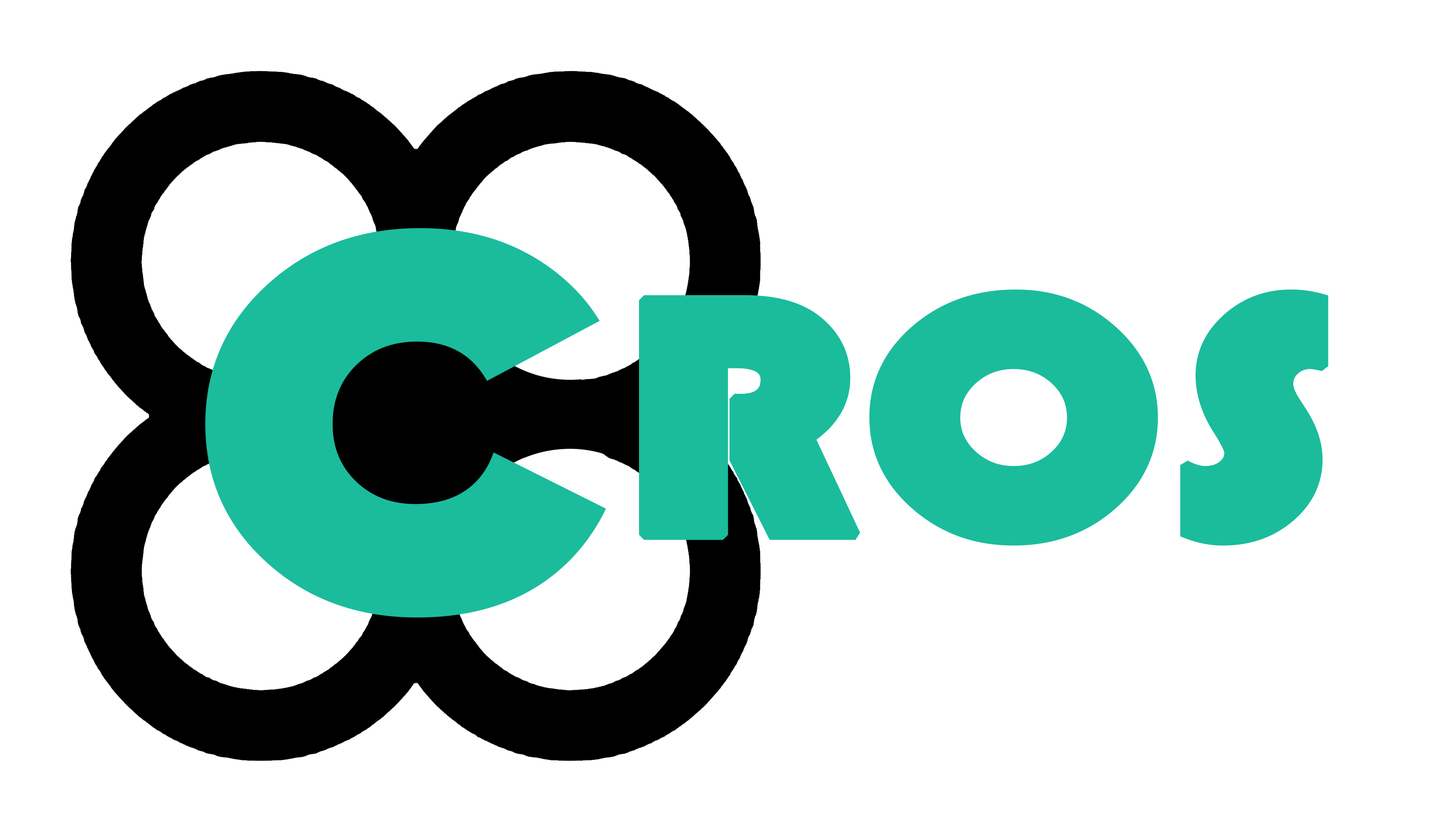
<style>
.page{position:relative;width:1435px;height:831px;background:#ffffff}
.page>*{position:absolute;margin:0}
.t1{font:351.8px "Bauhaus93";letter-spacing:-0.005em;color:#1abc9c;font-weight:bold;scale:1.13 1}
</style>
<div class="page">
<p class="t1" style="left:639px;top:289px;width:689px;height:257px">ROS</p>
</div>
